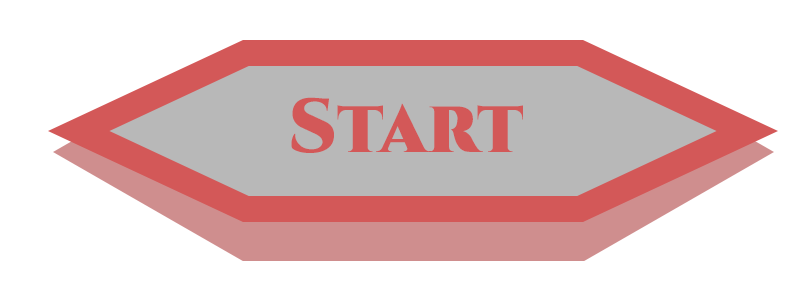
<style>
.page{position:relative;width:804px;height:286px;background:#ffffff}
.page>*{position:absolute;margin:0}
.t1{font:75.9px "Cinzel-Black";color:#d35858}
</style>
<div class="page">
<p class="t1" style="left:291px;top:97px;width:232px;height:56px">Start</p>
</div>
